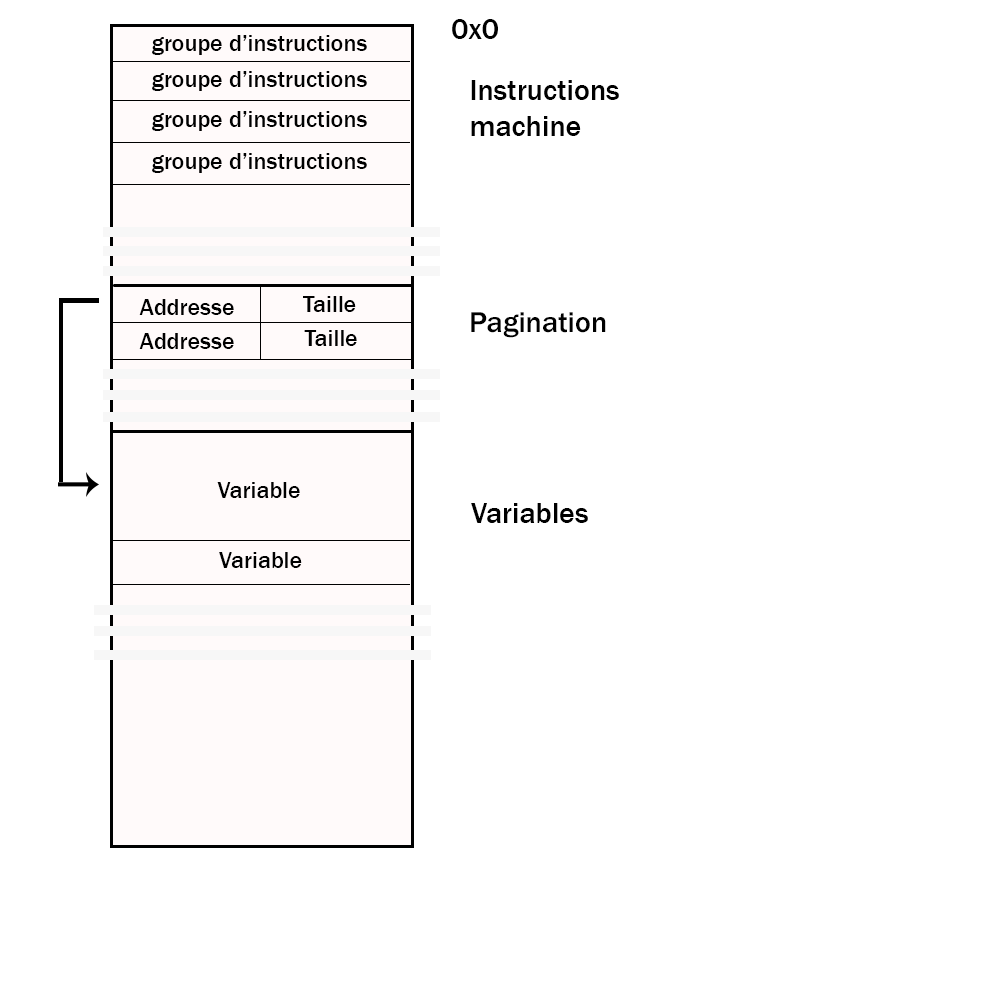
<style>
.page{position:relative;width:1000px;height:1000px;background:#ffffff}
.page>*{position:absolute;margin:0}
.t1{font:30px "FranklinGothic-Medium";color:#000000}
.t2{font:24px "FranklinGothic-Medium";color:#000000}
.t3{font:29.8px "FranklinGothic-Medium";color:#000000}
</style>
<div class="page">
<p class="t1" style="left:452px;top:19px;width:46px;height:20px">0x0</p>
<p class="t2" style="left:152px;top:35px;width:215px;height:20px">groupe d’instructions</p>
<p class="t2" style="left:152px;top:71px;width:215px;height:20px">groupe d’instructions</p>
<p class="t1" style="left:471px;top:80px;width:148px;height:56px;text-align:right">Instructions<br>machine</p>
<p class="t2" style="left:152px;top:111px;width:215px;height:20px">groupe d’instructions</p>
<p class="t2" style="left:152px;top:153px;width:215px;height:20px">groupe d’instructions</p>
<p class="t2" style="left:139px;top:299px;width:95px;height:16px">Addresse</p>
<p class="t2" style="left:303px;top:296px;width:53px;height:16px">Taille</p>
<p class="t3" style="left:471px;top:312px;width:135px;height:26px">Pagination</p>
<p class="t2" style="left:139px;top:333px;width:95px;height:16px">Addresse</p>
<p class="t2" style="left:304px;top:330px;width:53px;height:16px">Taille</p>
<p class="t2" style="left:217px;top:482px;width:83px;height:16px">Variable</p>
<p class="t1" style="left:471px;top:503px;width:117px;height:20px">Variables</p>
<p class="t2" style="left:219px;top:552px;width:83px;height:16px">Variable</p>
</div>
